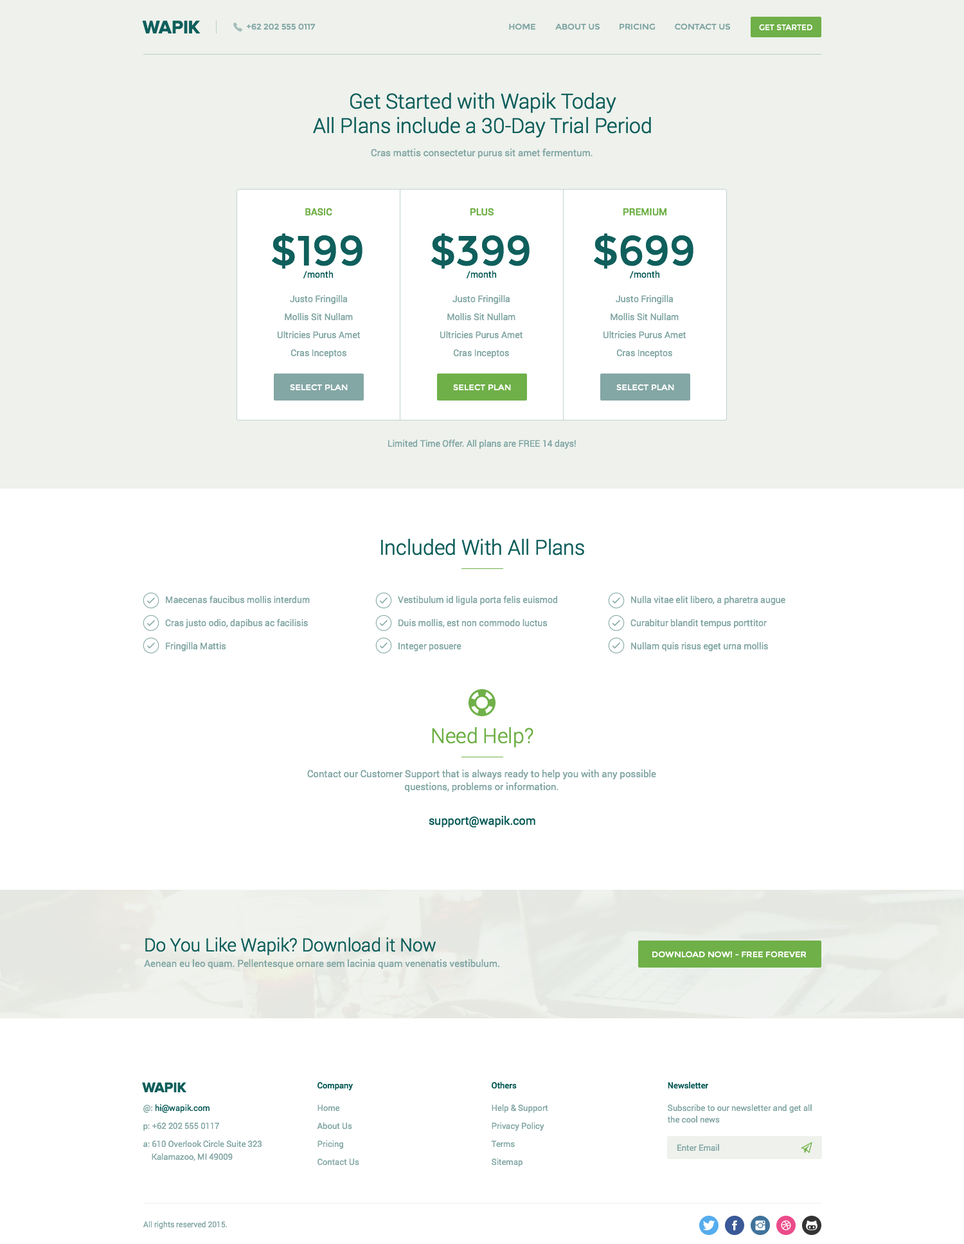
<style>
.page{position:relative;width:964px;height:1244px;background:#ffffff}
.page>*{position:absolute;margin:0}
.t1{font:18.5px "ProximaNova-Bold";color:#0f5f5c;text-transform:uppercase}
.t2{font:8.4px "Montserrat-Regular";color:#83a7a5;text-transform:uppercase}
.t3{font:7.7px "Montserrat-Regular";color:#ffffff;text-transform:uppercase}
.t4{font:20.6px/24.4px "Roboto-Light";color:#0f5f5c}
.t5{font:9.6px "Roboto-Regular";color:#83a7a5}
.t6{font:9.6px "Roboto-Medium";color:#6fb048;text-transform:uppercase}
.t7{font:41.8px "Montserrat-Regular";color:#0f5f5c}
.t8{font:9px "Roboto-Regular";color:#0f5f5c}
.t9{font:9px/18px "Roboto-Regular";color:#83a7a5}
.t10{font:8.4px "Montserrat-Regular";color:#ffffff;text-transform:uppercase}
.t11{font:9px "Roboto-Regular";color:#83a7a5}
.t12{font:20.6px "Roboto-Light";color:#0f5f5c}
.t13{font:9px/23.1px "Roboto-Regular";color:#83a7a5}
.t14{font:20.6px "Roboto-Light";color:#6fb048}
.t15{font:9.6px/12.9px "Roboto-Regular";color:#83a7a5}
.t16{font:11.6px "Roboto-Regular";color:#0f5f5c}
.t17{font:18px "Roboto-Light";color:#0f5f5c}
.t18{font:14.1px "ProximaNova-Bold";color:#0f5f5c;text-transform:uppercase}
.t19{font:8.4px "Roboto-Medium";color:#0f5f5c}
.t20{font:8.4px/18px "Roboto-Regular";color:#83a7a5}
.t21{font:8.4px/18px "Roboto-Regular";color:#0f5f5c}
.t22{font:8.4px/12.9px "Roboto-Regular";color:#83a7a5}
.t23{font:8.4px/11.6px "Roboto-Regular";color:#83a7a5}
.t24{font:8.4px "Roboto-Regular";color:#83a7a5}
.t25{font:7.7px "Roboto-Regular";color:#83a7a5}
</style>
<div class="page">
<p class="t1" style="left:142px;top:21px;width:58px;height:12px">WAPIK</p>
<p class="t2" style="left:246px;top:23px;width:70px;height:7px">+62 202 555 0117</p>
<p class="t2" style="left:509px;top:23px;width:27px;height:7px">Home</p>
<p class="t2" style="left:555px;top:23px;width:45px;height:7px">About Us</p>
<p class="t2" style="left:620px;top:23px;width:36px;height:7px">pricing</p>
<p class="t2" style="left:675px;top:23px;width:56px;height:7px">Contact Us</p>
<p class="t3" style="left:759px;top:24px;width:54px;height:7px">Get Started</p>
<p class="t4" style="left:313px;top:93px;width:338px;height:45px;text-align:center">Get Started with Wapik Today<br>All Plans include a 30-Day Trial Period</p>
<p class="t5" style="left:371px;top:148px;width:222px;height:10px">Cras mattis consectetur purus sit amet fermentum.</p>
<p class="t6" style="left:305px;top:208px;width:27px;height:8px">Basic</p>
<p class="t6" style="left:470px;top:208px;width:24px;height:8px">Plus</p>
<p class="t6" style="left:623px;top:208px;width:44px;height:8px">Premium</p>
<p class="t7" style="left:272px;top:233px;width:91px;height:36px">$199</p>
<p class="t7" style="left:431px;top:233px;width:99px;height:36px">$399</p>
<p class="t7" style="left:594px;top:233px;width:100px;height:36px">$699</p>
<p class="t8" style="left:303px;top:270px;width:31px;height:8px">/month</p>
<p class="t8" style="left:467px;top:270px;width:30px;height:8px">/month</p>
<p class="t8" style="left:630px;top:270px;width:30px;height:8px">/month</p>
<p class="t9" style="left:277px;top:294px;width:84px;height:64px;text-align:center">Justo Fringilla<br>Mollis Sit Nullam<br>Ultricies Purus Amet<br>Cras Inceptos</p>
<p class="t9" style="left:440px;top:294px;width:83px;height:64px;text-align:center">Justo Fringilla<br>Mollis Sit Nullam<br>Ultricies Purus Amet<br>Cras Inceptos</p>
<p class="t9" style="left:603px;top:294px;width:84px;height:64px;text-align:center">Justo Fringilla<br>Mollis Sit Nullam<br>Ultricies Purus Amet<br>Cras Inceptos</p>
<p class="t10" style="left:290px;top:384px;width:58px;height:7px">Select Plan</p>
<p class="t10" style="left:453px;top:384px;width:58px;height:7px">Select Plan</p>
<p class="t10" style="left:616px;top:384px;width:58px;height:7px">Select Plan</p>
<p class="t11" style="left:388px;top:439px;width:188px;height:10px">Limited Time Offer. All plans are FREE 14 days!</p>
<p class="t12" style="left:381px;top:539px;width:203px;height:16px">Included With All Plans</p>
<p class="t13" style="left:165px;top:595px;width:145px;height:56px">Maecenas faucibus mollis interdum<br>Cras justo odio, dapibus ac facilisis<br>Fringilla Mattis</p>
<p class="t13" style="left:398px;top:595px;width:160px;height:56px">Vestibulum id ligula porta felis euismod<br>Duis mollis, est non commodo luctus<br>Integer posuere</p>
<p class="t13" style="left:631px;top:595px;width:155px;height:56px">Nulla vitae elit libero, a pharetra augue<br>Curabitur blandit tempus porttitor<br>Nullam quis risus eget urna mollis</p>
<p class="t14" style="left:432px;top:727px;width:102px;height:21px">Need Help?</p>
<p class="t15" style="left:307px;top:770px;width:349px;height:22px;text-align:center">Contact our Customer Support that is always ready to help you with any possible<br>questions, problems or information.</p>
<p class="t16" style="left:429px;top:816px;width:107px;height:11px">support@wapik.com</p>
<p class="t17" style="left:145px;top:937px;width:291px;height:18px">Do You Like Wapik? Download it Now</p>
<p class="t10" style="left:652px;top:951px;width:155px;height:7px">download now! - FREE forever</p>
<p class="t5" style="left:144px;top:959px;width:356px;height:10px">Aenean eu leo quam. Pellentesque ornare sem lacinia quam venenatis vestibulum.</p>
<p class="t18" style="left:142px;top:1082px;width:44px;height:10px">wapik</p>
<p class="t19" style="left:318px;top:1082px;width:35px;height:8px">Company</p>
<p class="t19" style="left:492px;top:1081px;width:25px;height:8px">Others</p>
<p class="t19" style="left:668px;top:1081px;width:40px;height:8px">Newsletter</p>
<p class="t20" style="left:143px;top:1104px;width:119px;height:57px">@: <span class="t21">hi@wapik.com<br></span>p: +62 202 555 0117<br>a: 610 Overlook Circle Suite 323<br><span class="t22">    Kalamazoo, MI 49009</span></p>
<p class="t20" style="left:317px;top:1104px;width:42px;height:62px">Home<br>About Us<br>Pricing<br>Contact Us</p>
<p class="t20" style="left:491px;top:1104px;width:57px;height:63px">Help &amp; Support<br>Privacy Policy<br>Terms<br>Sitemap</p>
<p class="t23" style="left:667px;top:1104px;width:145px;height:19px">Subscribe to our newsletter and get all<br>the cool news</p>
<p class="t24" style="left:677px;top:1144px;width:42px;height:7px">Enter Email</p>
<p class="t25" style="left:143px;top:1221px;width:84px;height:8px">All rights reserved 2015.</p>
</div>
